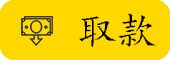
<style>
.page{position:relative;width:170px;height:60px;background:#ffd800}
.page>*{position:absolute;margin:0}
.t1{font:40px "¿¬Ìå";color:#000000}
</style>
<div class="page">
<p class="t1" style="left:79px;top:13px;width:77px;height:34px">取款</p>
</div>
